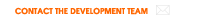
<style>
.page{position:relative;width:200px;height:20px;background:#ffffff}
.page>*{position:absolute;margin:0}
.t1{font:8px "Atlanta-Demi";color:#ff6600}
</style>
<div class="page">
<p class="t1" style="left:15px;top:7px;width:133px;height:8px">CONTACT THE DEVELOPMENT TEAM</p>
</div>
